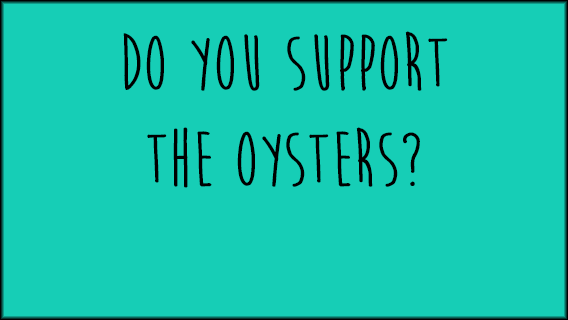
<style>
.page{position:relative;width:568px;height:320px;background:#16ceb6}
.page>*{position:absolute;margin:0}
.t1{font:80px "MoonFlowerBold";color:#000000}
</style>
<div class="page">
<p class="t1" style="left:123px;top:31px;width:325px;height:157px;text-align:center">Do you support <br>the oysters?</p>
</div>
